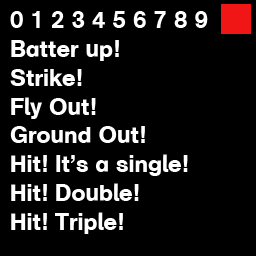
<style>
.page{position:relative;width:256px;height:256px;background:#000000}
.page>*{position:absolute;margin:0}
.t1{font:24px "AGSchulbuchTwoBQ-Medium";color:#ffffff}
</style>
<div class="page">
<p class="t1" style="left:10px;top:11px;width:198px;height:223px">0 1 2 3 4 5 6 7 8 9<br>Batter up!<br>Strike!<br>Fly Out!<br>Ground Out!<br>Hit! It’s a single!<br>Hit! Double!<br>Hit! Triple!</p>
</div>
